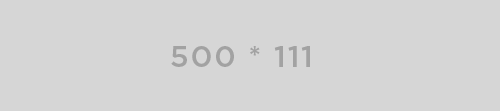
<style>
.page{position:relative;width:500px;height:111px;background:#d6d6d6}
.page>*{position:absolute;margin:0}
.t1{font:30px "Gotham-Medium";letter-spacing:0.06em;color:#a2a2a2}
</style>
<div class="page">
<p class="t1" style="left:171px;top:46px;width:139px;height:21px">500 * 111</p>
</div>
